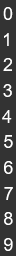
<style>
.page{position:relative;width:16px;height:256px;background:#333333}
.page>*{position:absolute;margin:0}
.t1{font:18.2px "ArialMT";color:#ffffff}
</style>
<div class="page">
<p class="t1" style="left:3px;top:7px;width:10px;height:13px">0</p>
<p class="t1" style="left:4px;top:33px;width:5px;height:13px">1</p>
<p class="t1" style="left:3px;top:58px;width:9px;height:13px">2</p>
<p class="t1" style="left:3px;top:84px;width:9px;height:13px">3</p>
<p class="t1" style="left:2px;top:110px;width:10px;height:13px">4</p>
<p class="t1" style="left:4px;top:135px;width:9px;height:13px">5</p>
<p class="t1" style="left:4px;top:161px;width:9px;height:13px">6</p>
<p class="t1" style="left:4px;top:187px;width:9px;height:13px">7</p>
<p class="t1" style="left:4px;top:212px;width:9px;height:13px">8</p>
<p class="t1" style="left:4px;top:238px;width:9px;height:13px">9</p>
</div>
